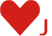
<style>
.page{position:relative;width:52px;height:36px;background:#d22018}
.page>*{position:absolute;margin:0}
.t1{font:23.4px "MyriadPro-Regular";letter-spacing:-0.1em;color:#d22018;font-weight:bold}
</style>
<div class="page">
<p class="t1" style="left:39px;top:19px;width:9px;height:17px">J</p>
</div>
